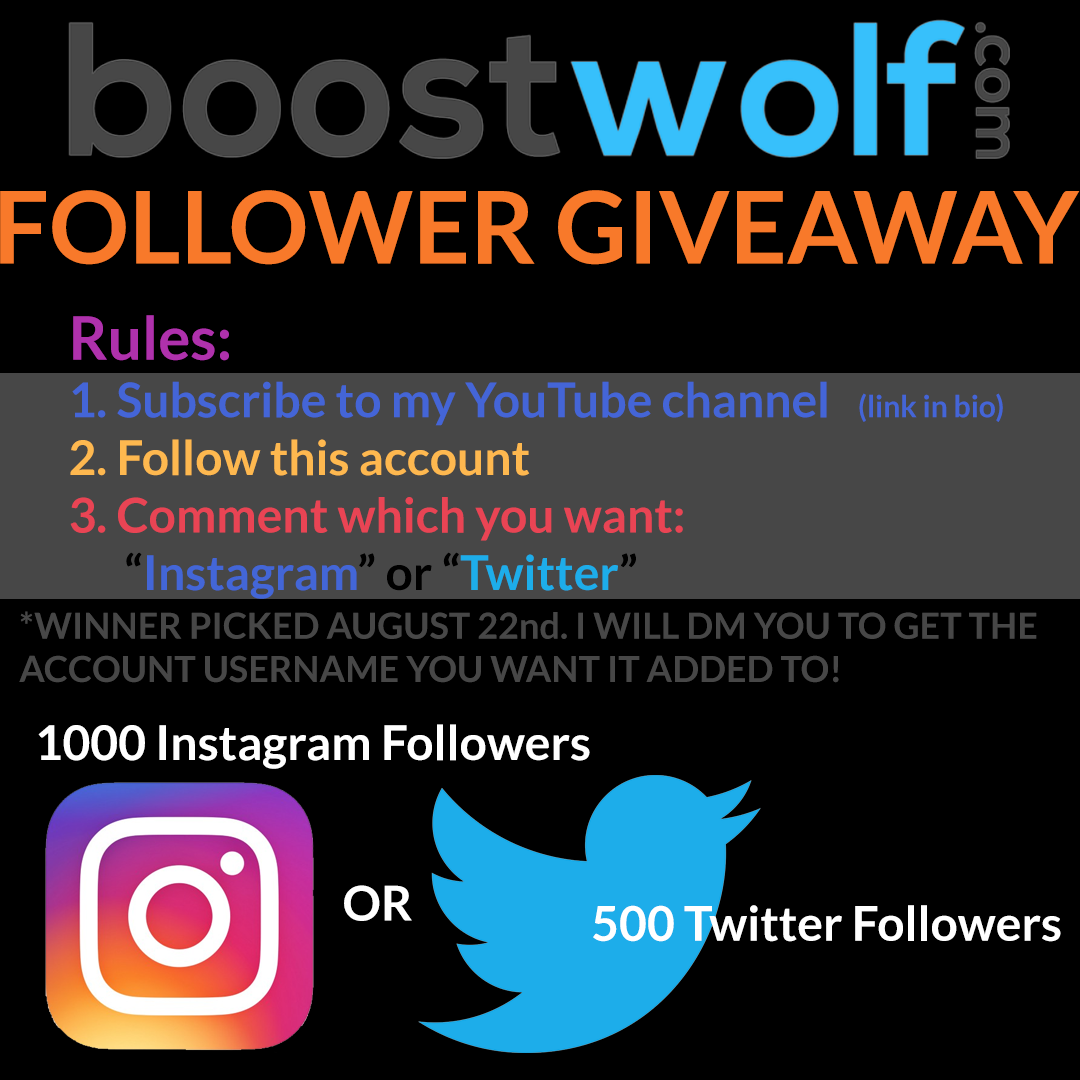
<style>
.page{position:relative;width:1080px;height:1080px;background:#000000}
.page>*{position:absolute;margin:0}
.t1{font:100px "Lato-Bold";color:#f8792a}
.t2{font:48px "Lato-Bold";color:#4465d7}
.t3{font:60px "Lato-Bold";color:#af31ac}
.t4{font:30px "Lato-Bold";color:#4465d7}
.t5{font:48px "Lato-Bold";color:#feb84f}
.t6{font:48px "Lato-Bold";color:#e94454}
.t7{font:48px "Lato-Bold";color:#000000}
.t8{font:48px "Lato-Bold";color:#4366d7}
.t9{font:48px "Lato-Bold";color:#1dadea}
.t10{font:36px "Lato-Bold";color:#474747}
.t11{font:48px "Lato-Bold";color:#ffffff}
</style>
<div class="page">
<p class="t1" style="left:0px;top:190px;width:1080px;height:75px">FOLLOWER GIVEAWAY</p>
<p class="t2" style="left:70px;top:315px;width:933px;height:284px"><span class="t3">Rules:<br></span>1. Subscribe to my YouTube channel   <span class="t4">(link in bio)<br></span><span class="t5">2. Follow this account<br></span><span class="t6">3. Comment which you want:<br>      </span><span class="t7">“</span><span class="t8">Instagram</span><span class="t7">” or “</span><span class="t9">Twitter</span><span class="t7">”</span></p>
<p class="t10" style="left:19px;top:611px;width:1018px;height:72px">*WINNER PICKED AUGUST 22nd. I WILL DM YOU TO GET THE<br>ACCOUNT USERNAME YOU WANT IT ADDED TO!</p>
<p class="t11" style="left:38px;top:724px;width:552px;height:45px">1000 Instagram Followers</p>
<p class="t11" style="left:344px;top:885px;width:68px;height:36px">OR</p>
<p class="t11" style="left:593px;top:905px;width:468px;height:37px">500 Twitter Followers</p>
</div>
